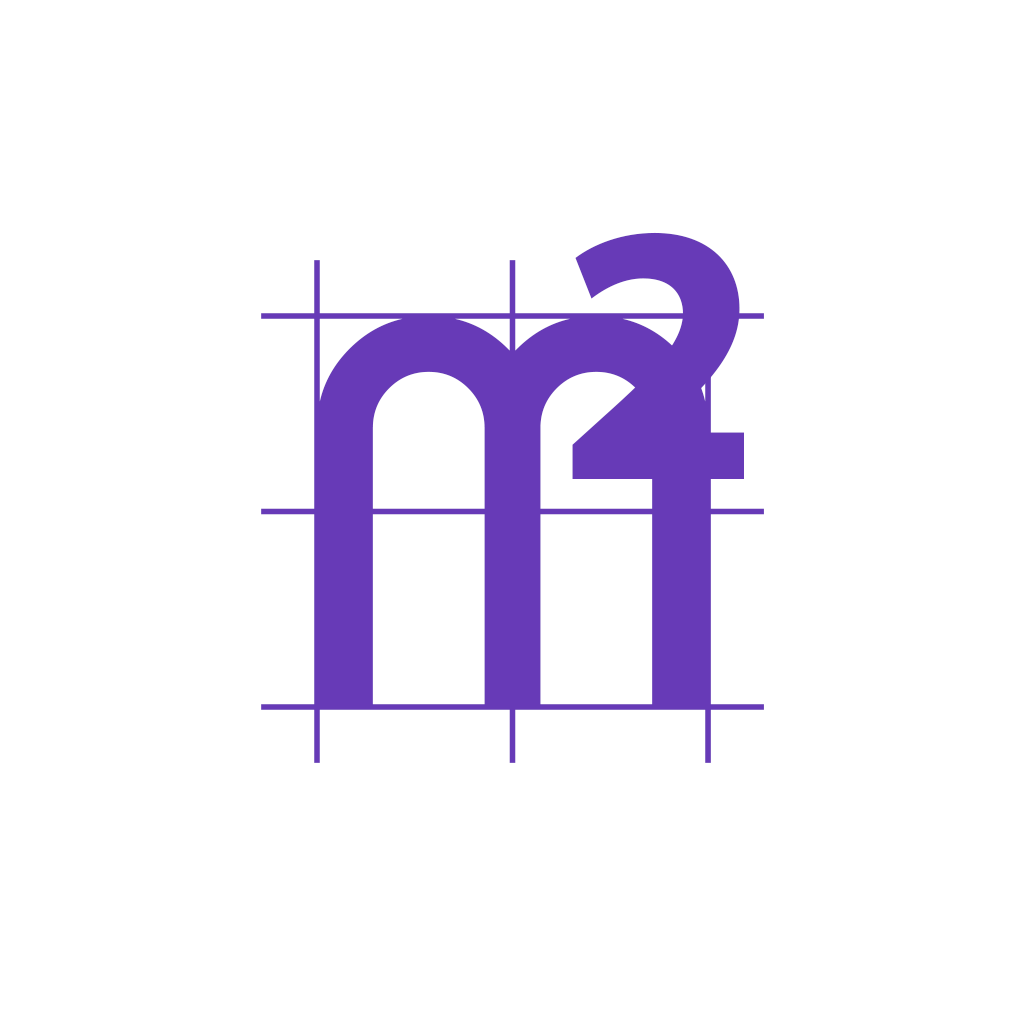
<style>
.page{position:relative;width:1024px;height:1024px;background:#ffffff}
.page>*{position:absolute;margin:0}
.t1{font:372px "MyriadPro-Bold";color:#673ab7}
.t2{font:572px "Gridget";color:#673ab7}
</style>
<div class="page">
<p class="t1" style="left:572px;top:232px;width:172px;height:247px">2</p>
<p class="t2" style="left:261px;top:260px;width:503px;height:503px">M</p>
</div>
